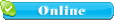
<style>
.page{position:relative;width:114px;height:20px}
.page>*{position:absolute;margin:0}
.t1{font:12px "Elephant-Regular";letter-spacing:0.1em;color:#fffefe}
</style>
<div class="page">
<p class="t1" style="left:38px;top:6px;width:47px;height:9px">Online</p>
</div>
